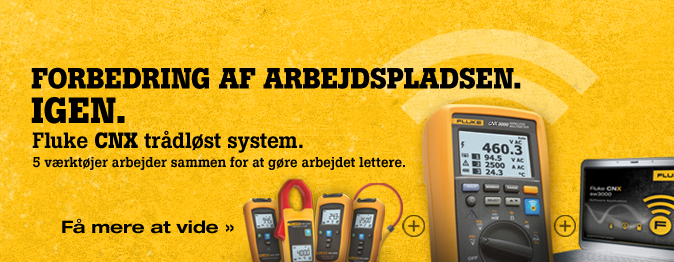
<style>
.page{position:relative;width:674px;height:262px}
.page>*{position:absolute;margin:0}
.t1{font:29px "BotonPro-Bold";letter-spacing:-0.005em;color:#000000;text-transform:uppercase}
.t2{font:36px "BotonPro-Bold";letter-spacing:-0.005em;color:#000000;text-transform:uppercase}
.t3{font:14px/18.8px "BotonPro-Medium";letter-spacing:-0.01em;color:#000000}
.t4{font:22px/18.8px "BotonPro-Medium";letter-spacing:-0.01em;color:#000000}
.t5{font:22px/18.8px "BotonPro-Bold";letter-spacing:-0.01em;color:#000000}
.t6{font:17px "HelveticaNeueLTStd-BdEx";letter-spacing:-0.01em;color:#000000}
</style>
<div class="page">
<p class="t1" style="left:31px;top:67px;width:490px;height:22px">Forbedring af arbejdspladsen.</p>
<p class="t2" style="left:31px;top:97px;width:94px;height:27px">Igen.</p>
<p class="t3" style="left:32px;top:130px;width:373px;height:40px"><span class="t4">Fluke </span><span class="t5">CNX</span><span class="t4"> trådløst system.<br></span>5 værktøjer arbejder sammen for at gøre arbejdet lettere.</p>
<p class="t6" style="left:62px;top:218px;width:172px;height:16px">Få mere at vide »</p>
</div>
